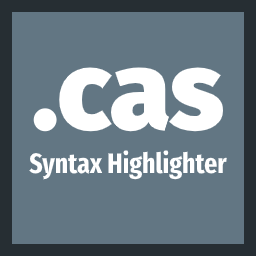
<style>
.page{position:relative;width:256px;height:256px;background:#627683}
.page>*{position:absolute;margin:0}
.t1{font:111px "FiraSans-Heavy";color:#ffffff}
.t2{font:28px "FiraSansCompressed-Bold";color:#ffffff}
</style>
<div class="page">
<p class="t1" style="left:33px;top:67px;width:191px;height:65px">.cas</p>
<p class="t2" style="left:29px;top:150px;width:198px;height:30px">Syntax Highlighter</p>
</div>
